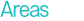
<style>
.page{position:relative;width:84px;height:21px;background:#ffffff}
.page>*{position:absolute;margin:0}
.t1{font:20px "GothicMB101Pro-Regular";letter-spacing:-0.06em;color:#1dbcc0;scale:0.9 1}
</style>
<div class="page">
<p class="t1" style="left:0px;top:1px;width:49px;height:16px">Areas</p>
</div>
